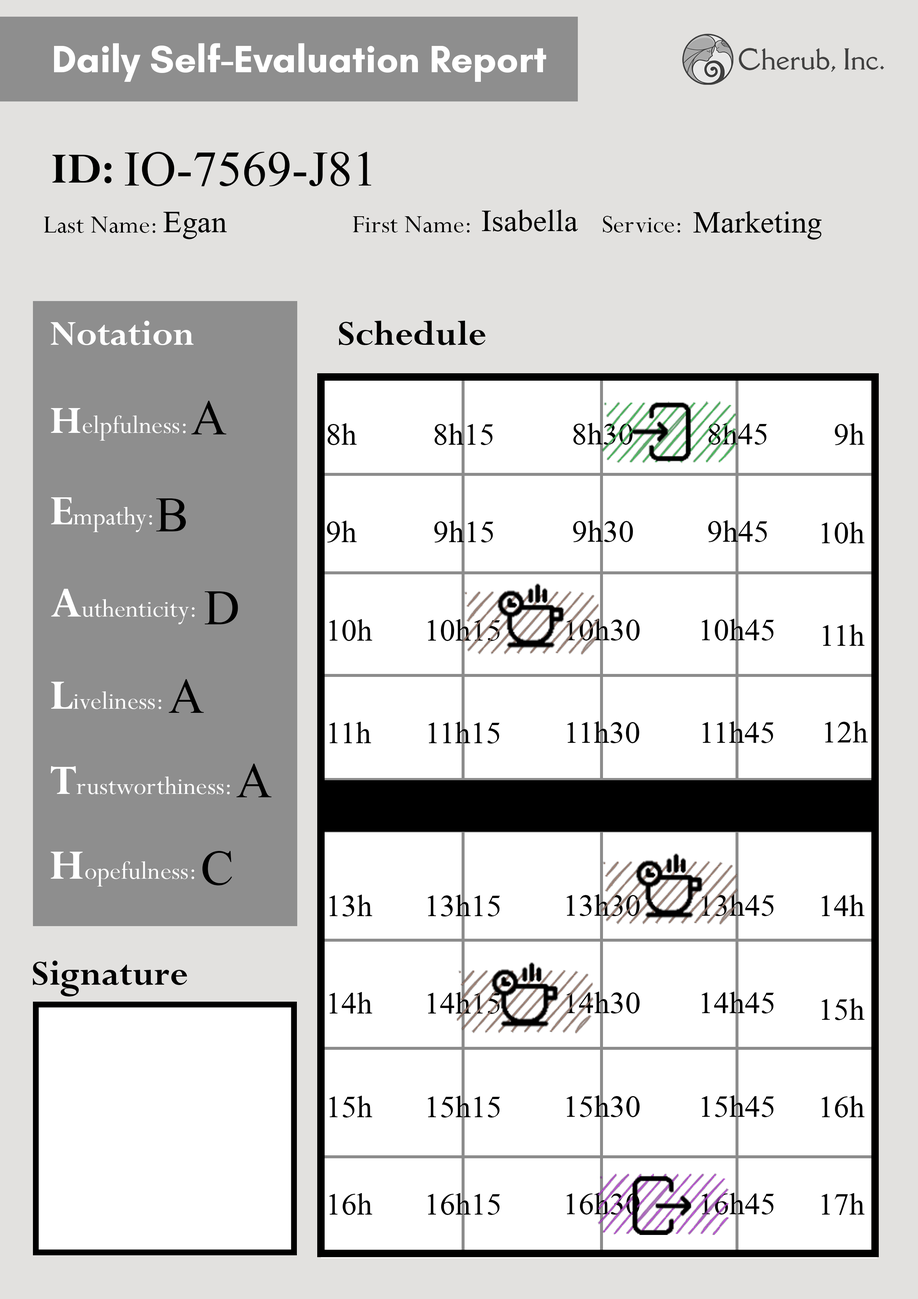
<style>
.page{position:relative;width:918px;height:1299px;background:#ffffff}
.page>*{position:absolute;margin:0}
.t1{font:74px "Microsoft-Himalaya";color:#000000}
.t2{font:46.3px "Microsoft-Himalaya";color:#000000}
</style>
<div class="page">
<p class="t1" style="left:125px;top:152px;width:246px;height:34px">IO-7569-J81</p>
<p class="t2" style="left:482px;top:210px;width:96px;height:21px">Isabella</p>
<p class="t2" style="left:163px;top:212px;width:64px;height:27px">Egan</p>
<p class="t2" style="left:693px;top:211px;width:129px;height:29px">Marketing</p>
<p class="t1" style="left:191px;top:401px;width:36px;height:33px">A</p>
<p class="t2" style="left:328px;top:423px;width:29px;height:22px">8h</p>
<p class="t2" style="left:435px;top:423px;width:58px;height:22px">8h15</p>
<p class="t2" style="left:573px;top:423px;width:60px;height:22px">8h30</p>
<p class="t2" style="left:709px;top:423px;width:58px;height:22px">8h45</p>
<p class="t2" style="left:835px;top:423px;width:30px;height:22px">9h</p>
<p class="t1" style="left:156px;top:498px;width:30px;height:33px">B</p>
<p class="t2" style="left:327px;top:521px;width:30px;height:21px">9h</p>
<p class="t2" style="left:434px;top:521px;width:60px;height:21px">9h15</p>
<p class="t2" style="left:573px;top:520px;width:60px;height:22px">9h30</p>
<p class="t2" style="left:708px;top:520px;width:59px;height:22px">9h45</p>
<p class="t2" style="left:822px;top:522px;width:43px;height:21px">10h</p>
<p class="t1" style="left:205px;top:591px;width:33px;height:33px">D</p>
<p class="t2" style="left:329px;top:619px;width:43px;height:22px">10h</p>
<p class="t2" style="left:428px;top:619px;width:72px;height:22px">10h15</p>
<p class="t2" style="left:566px;top:619px;width:74px;height:21px">10h30</p>
<p class="t2" style="left:702px;top:619px;width:72px;height:21px">10h45</p>
<p class="t2" style="left:823px;top:624px;width:42px;height:22px">11h</p>
<p class="t1" style="left:169px;top:679px;width:35px;height:34px">A</p>
<p class="t2" style="left:329px;top:722px;width:42px;height:21px">11h</p>
<p class="t2" style="left:428px;top:722px;width:72px;height:21px">11h15</p>
<p class="t2" style="left:567px;top:721px;width:72px;height:22px">11h30</p>
<p class="t2" style="left:702px;top:721px;width:72px;height:22px">11h45</p>
<p class="t2" style="left:825px;top:721px;width:43px;height:21px">12h</p>
<p class="t1" style="left:237px;top:763px;width:35px;height:34px">A</p>
<p class="t1" style="left:202px;top:851px;width:30px;height:34px">C</p>
<p class="t2" style="left:329px;top:894px;width:43px;height:22px">13h</p>
<p class="t2" style="left:428px;top:894px;width:72px;height:22px">13h15</p>
<p class="t2" style="left:566px;top:894px;width:74px;height:22px">13h30</p>
<p class="t2" style="left:702px;top:894px;width:72px;height:22px">13h45</p>
<p class="t2" style="left:822px;top:894px;width:43px;height:22px">14h</p>
<p class="t2" style="left:329px;top:992px;width:43px;height:21px">14h</p>
<p class="t2" style="left:428px;top:992px;width:72px;height:22px">14h15</p>
<p class="t2" style="left:566px;top:991px;width:74px;height:22px">14h30</p>
<p class="t2" style="left:702px;top:991px;width:72px;height:22px">14h45</p>
<p class="t2" style="left:822px;top:998px;width:43px;height:22px">15h</p>
<p class="t2" style="left:329px;top:1095px;width:43px;height:22px">15h</p>
<p class="t2" style="left:428px;top:1095px;width:72px;height:22px">15h15</p>
<p class="t2" style="left:566px;top:1095px;width:74px;height:22px">15h30</p>
<p class="t2" style="left:702px;top:1095px;width:72px;height:22px">15h45</p>
<p class="t2" style="left:822px;top:1095px;width:43px;height:22px">16h</p>
<p class="t2" style="left:329px;top:1193px;width:43px;height:22px">16h</p>
<p class="t2" style="left:428px;top:1193px;width:72px;height:22px">16h15</p>
<p class="t2" style="left:566px;top:1192px;width:74px;height:22px">16h30</p>
<p class="t2" style="left:702px;top:1192px;width:72px;height:22px">16h45</p>
<p class="t2" style="left:822px;top:1193px;width:43px;height:22px">17h</p>
</div>
